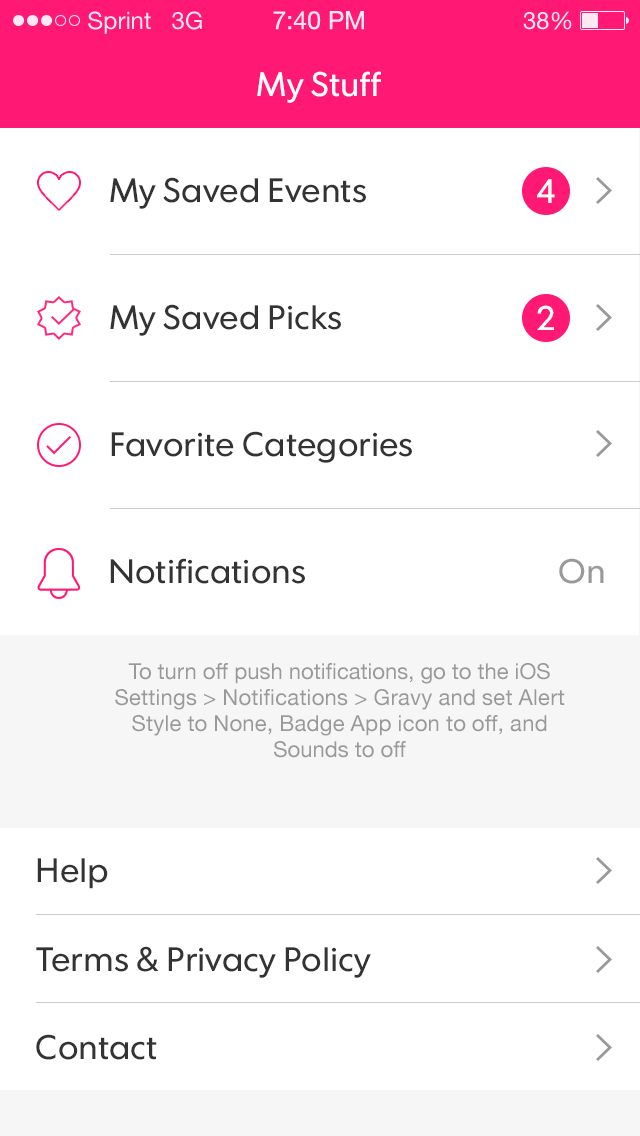
<style>
.page{position:relative;width:640px;height:1136px;background:#ffffff}
.page>*{position:absolute;margin:0}
.t1{font:24px "HelveticaNeue";color:#ffffff}
.t2{font:25px "HelveticaNeue";color:#ffffff}
.t3{font:34px "FuturaToday-Normal";color:#ffffff}
.t4{font:34px "FuturaToday-Normal";color:#333333}
.t5{font:34px "FuturaToday-Normal";color:#999999}
.t6{font:22px/26px "HelveticaNeue";color:#999999}
</style>
<div class="page">
<p class="t1" style="left:88px;top:11px;width:114px;height:23px">Sprint   3G</p>
<p class="t2" style="left:273px;top:11px;width:91px;height:19px">7:40 PM</p>
<p class="t1" style="left:523px;top:11px;width:49px;height:19px">38%</p>
<p class="t3" style="left:257px;top:71px;width:124px;height:32px">My Stuff</p>
<p class="t4" style="left:110px;top:177px;width:256px;height:32px">My Saved Events</p>
<p class="t3" style="left:537px;top:179px;width:18px;height:24px">4</p>
<p class="t4" style="left:110px;top:304px;width:231px;height:32px">My Saved Picks</p>
<p class="t3" style="left:537px;top:305px;width:17px;height:25px">2</p>
<p class="t4" style="left:111px;top:431px;width:301px;height:32px">Favorite Categories</p>
<p class="t4" style="left:110px;top:558px;width:195px;height:26px">Notifications</p>
<p class="t5" style="left:559px;top:558px;width:45px;height:26px">On</p>
<p class="t6" style="left:115px;top:663px;width:450px;height:95px;text-align:center">To turn off push notifications, go to the iOS <br>Settings &gt; Notifications &gt; Gravy and set Alert Style to None, Badge App icon to off, and <br>Sounds to off</p>
<p class="t4" style="left:37px;top:858px;width:71px;height:31px">Help</p>
<p class="t4" style="left:36px;top:946px;width:335px;height:32px">Terms &amp; Privacy Policy</p>
<p class="t4" style="left:36px;top:1034px;width:121px;height:26px">Contact</p>
</div>
